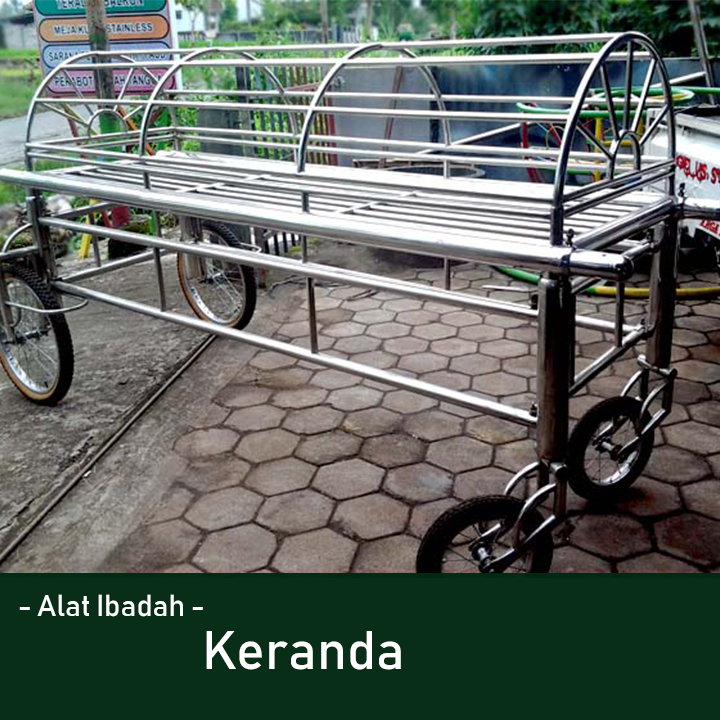
<style>
.page{position:relative;width:720px;height:720px}
.page>*{position:absolute;margin:0}
.t1{font:30px "Bahnschrift";color:#ffffff}
.t2{font:53.6px "Bahnschrift";color:#ffffff}
</style>
<div class="page">
<p class="t1" style="left:19px;top:594px;width:184px;height:23px">- Alat Ibadah -</p>
<p class="t2" style="left:206px;top:631px;width:195px;height:39px">Keranda</p>
</div>
